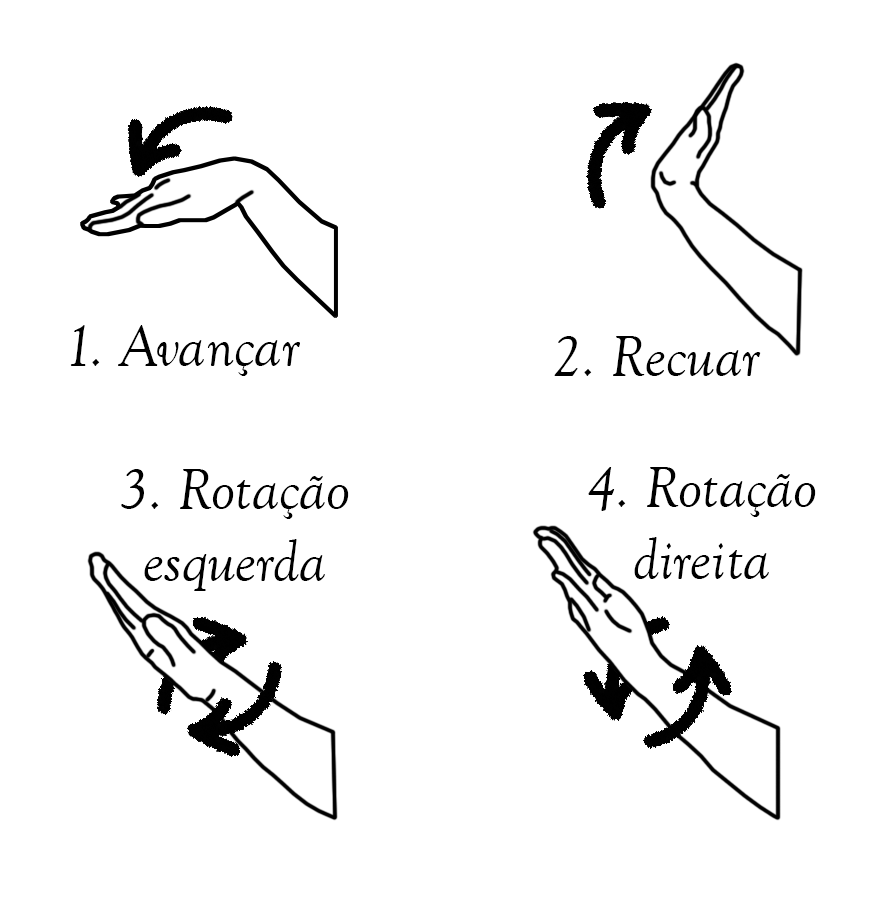
<style>
.page{position:relative;width:888px;height:916px;background:#ffffff}
.page>*{position:absolute;margin:0}
.t1{font:60px "GoudyOldStyleT-Italic";color:#000000}
</style>
<div class="page">
<p class="t1" style="left:70px;top:325px;width:230px;height:51px">1. Avançar</p>
<p class="t1" style="left:554px;top:336px;width:207px;height:40px">2. Recuar</p>
<p class="t1" style="left:121px;top:469px;width:228px;height:122px;text-align:center">3. Rotação<br>esquerda</p>
<p class="t1" style="left:588px;top:467px;width:228px;height:112px;text-align:center">4. Rotação<br>direita</p>
</div>
